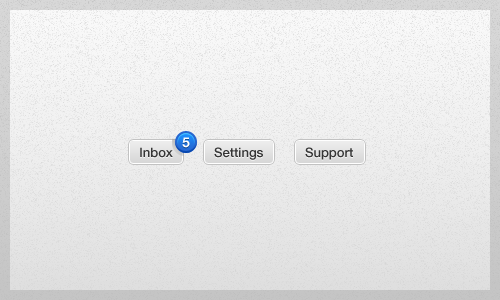
<style>
.page{position:relative;width:500px;height:300px}
.page>*{position:absolute;margin:0}
.t1{font:13.5px "HelveticaNeueLTStd-Bd";color:#ffffff}
.t2{font:13px "HelveticaNeueLTStd-Md";color:#353535}
</style>
<div class="page">
<p class="t1" style="left:182px;top:137px;width:8px;height:11px">5</p>
<p class="t2" style="left:140px;top:147px;width:33px;height:11px">Inbox</p>
<p class="t2" style="left:214px;top:147px;width:49px;height:13px">Settings</p>
<p class="t2" style="left:305px;top:147px;width:48px;height:13px">Support</p>
</div>
